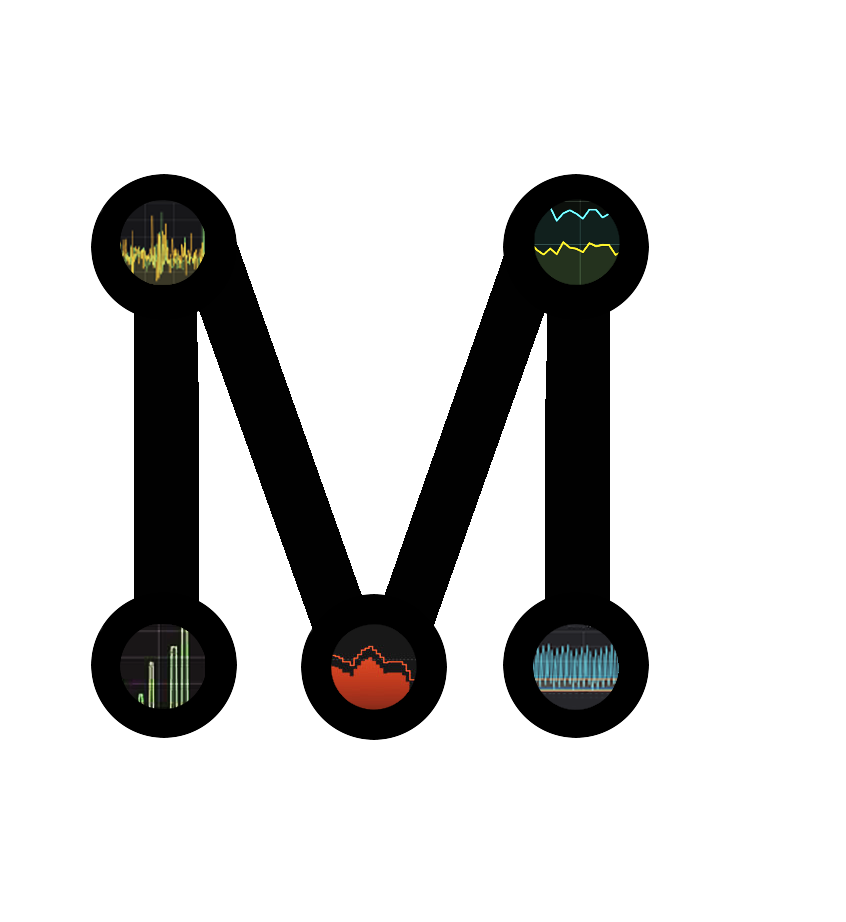
<style>
.page{position:relative;width:846px;height:922px;background:#ffffff}
.page>*{position:absolute;margin:0}
.t1{font:661.5px "Helvetica";letter-spacing:0.1em;color:#010101;text-transform:uppercase;scale:1.04 1}
</style>
<div class="page">
<p class="t1" style="left:134px;top:227px;width:476px;height:476px">M</p>
</div>
